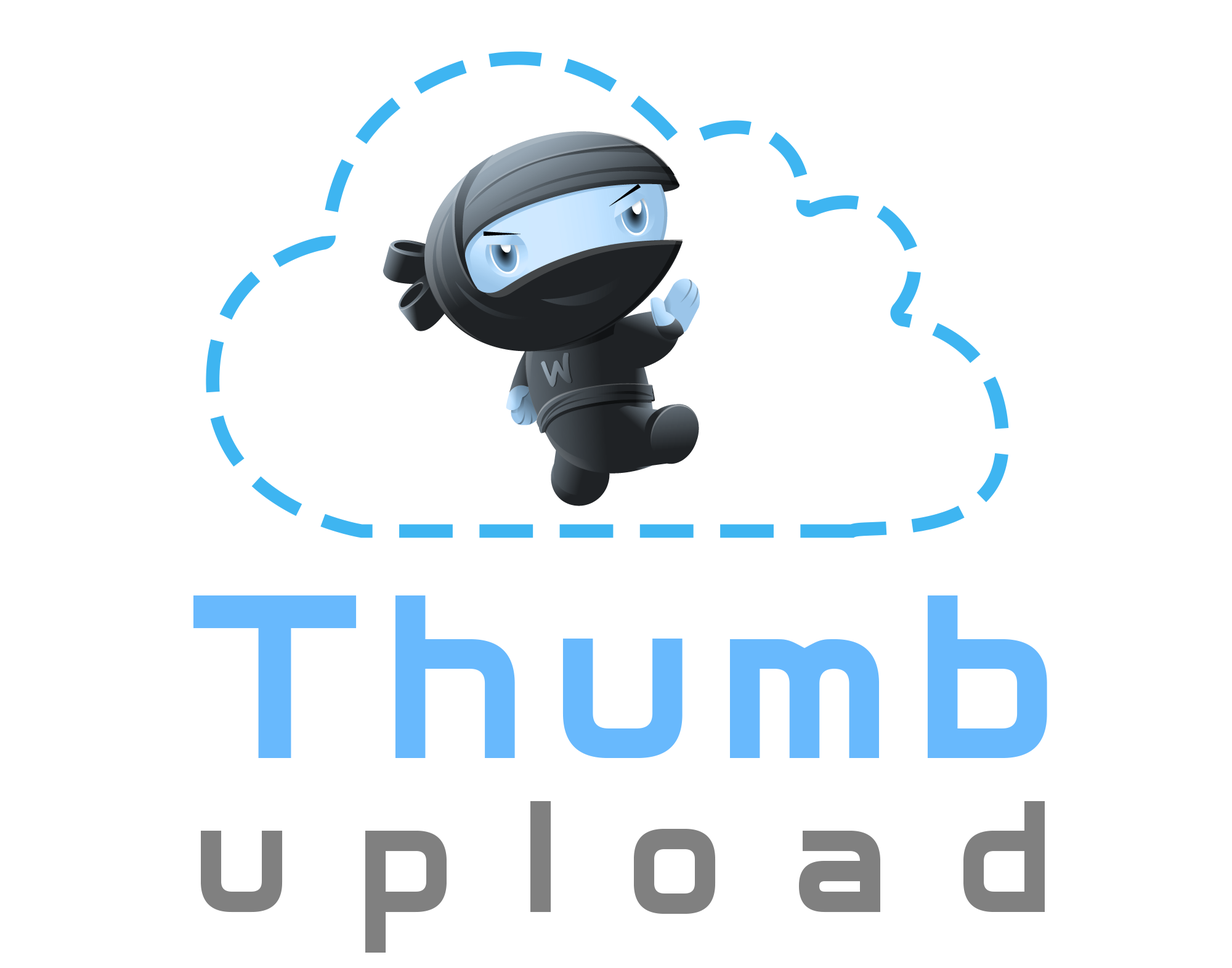
<style>
.page{position:relative;width:1232px;height:968px;background:#ffffff}
.page>*{position:absolute;margin:0}
.t1{font:184.7px/154px "Archangelsk";letter-spacing:0.391em;color:#808080}
.t2{font:270.9px/154px "Archangelsk";letter-spacing:0.117em;color:#68b9fd}
</style>
<div class="page">
<p class="t1" style="left:193px;top:596px;width:854px;height:357px;text-align:center"><span class="t2">Thumb<br></span>upload</p>
</div>
